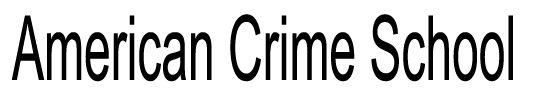
<style>
.page{position:relative;width:550px;height:100px;background:#ffffff}
.page>*{position:absolute;margin:0}
.t1{font:90px "ArialMT";color:#000000;scale:0.53 1}
</style>
<div class="page">
<p class="t1" style="left:11px;top:14px;width:502px;height:68px">American Crime School</p>
</div>
